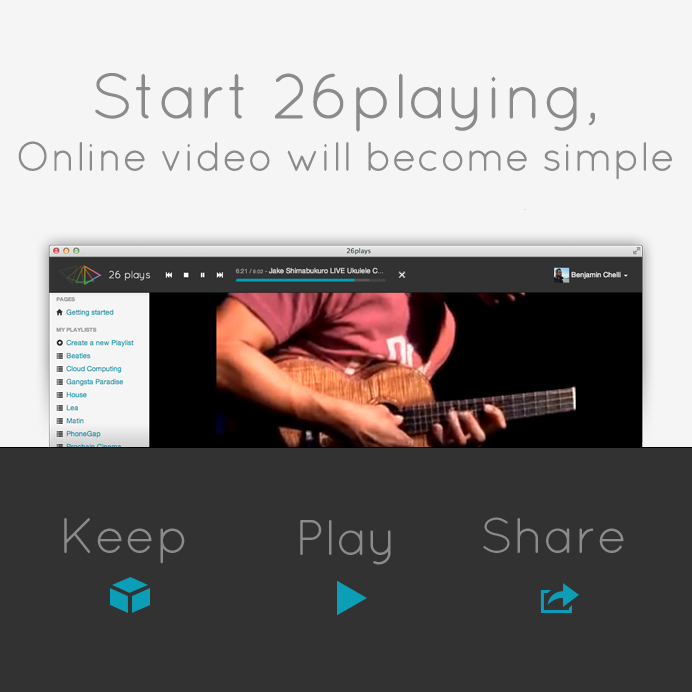
<style>
.page{position:relative;width:692px;height:692px;background:#323232}
.page>*{position:absolute;margin:0}
.t1{font:41px/34.4px "QuicksandBook-Regular";color:#8c8b8b}
.t2{font:64px/34.4px "QuicksandBook-Regular";color:#8c8b8b}
.t3{font:50px "QuicksandBook-Regular";color:#8c8b8b}
</style>
<div class="page">
<p class="t1" style="left:18px;top:73px;width:654px;height:107px;text-align:center"><span class="t2">Start 26playing,<br></span>Online video will become simple</p>
<p class="t3" style="left:64px;top:518px;width:121px;height:46px">Keep</p>
<p class="t3" style="left:300px;top:520px;width:91px;height:45px">Play</p>
<p class="t3" style="left:483px;top:517px;width:141px;height:36px">Share</p>
</div>
